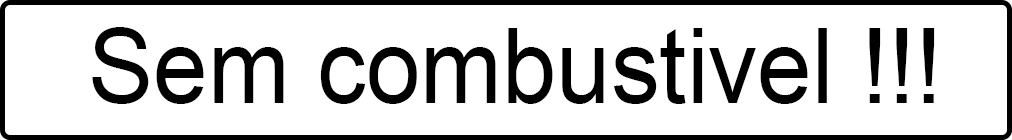
<style>
.page{position:relative;width:1012px;height:140px;background:#ffffff}
.page>*{position:absolute;margin:0}
.t1{font:105.2px "ArialMT";color:#000000;scale:0.93 1}
</style>
<div class="page">
<p class="t1" style="left:92px;top:27px;width:843px;height:77px">Sem combustivel !!!</p>
</div>
